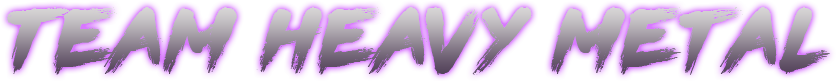
<style>
.page{position:relative;width:836px;height:81px;background:#ffffff}
.page>*{position:absolute;margin:0}
.t1{font:66.7px "SNNeoNoire-Regular";letter-spacing:0.025em;color:#ffffff}
</style>
<div class="page">
<p class="t1" style="left:6px;top:7px;width:824px;height:68px">Team heavy metal</p>
</div>
